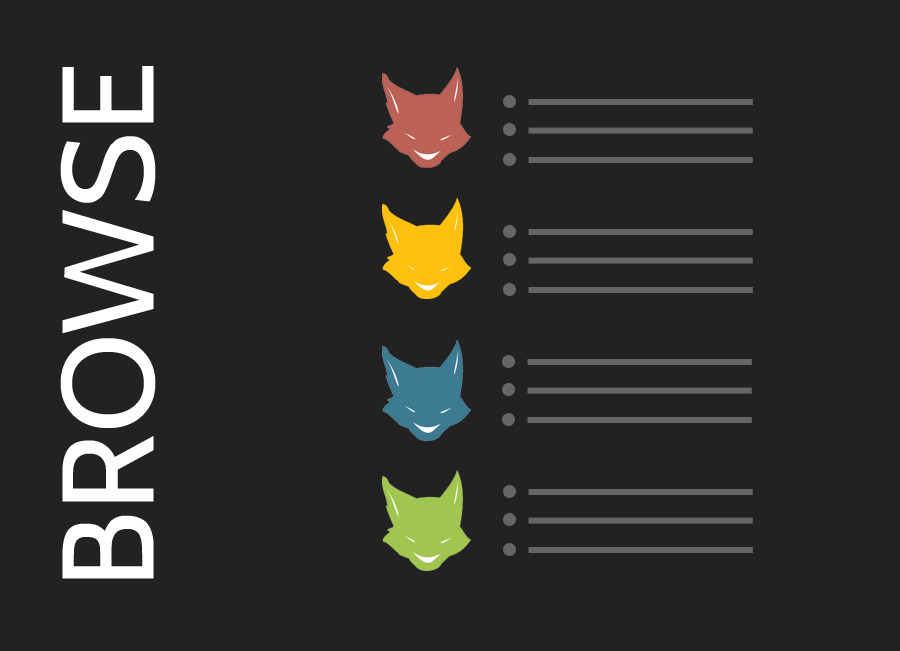
<style>
.page{position:relative;width:900px;height:651px;background:#222222}
.page>*{position:absolute;margin:0}
.t1{font:130px "Cabin-Regular";color:#ffffff}
</style>
<div class="page">
<p class="t1" style="left:60px;top:66px;width:96px;height:513px;rotate:-90deg">BROWSE</p>
</div>
